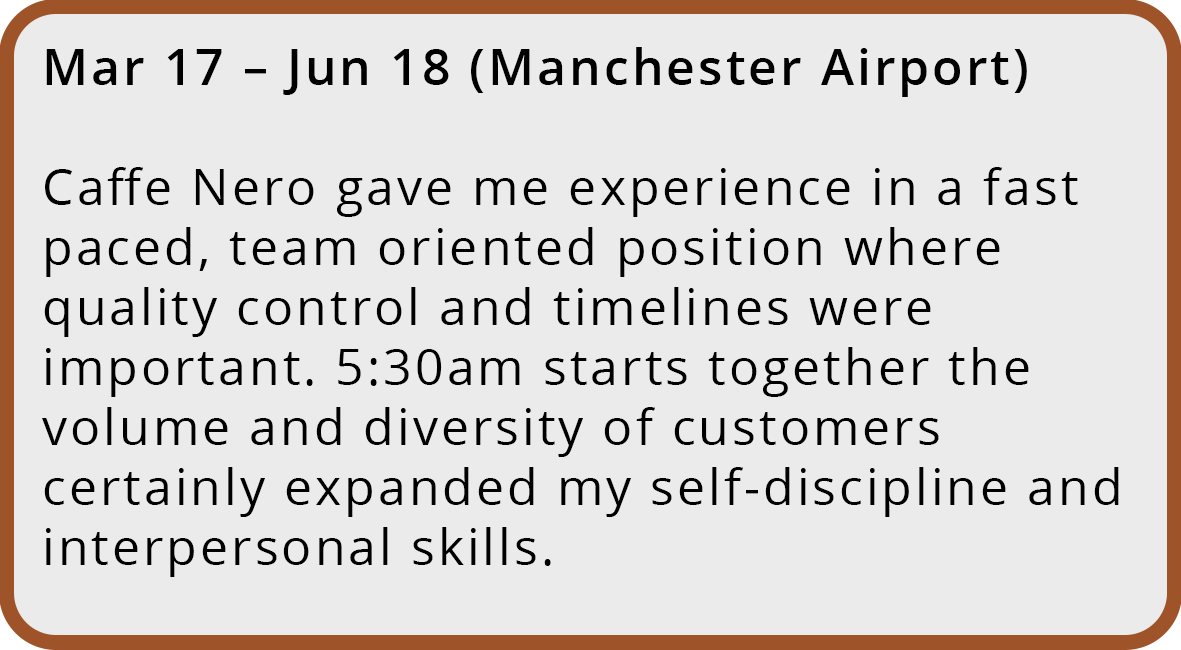
<style>
.page{position:relative;width:1181px;height:650px;background:#ebebeb}
.page>*{position:absolute;margin:0}
.t1{font:50px "OpenSans-Regular";letter-spacing:0.06em;color:#000000}
.t2{font:50px "OpenSans-SemiBold";letter-spacing:0.06em;color:#000000}
</style>
<div class="page">
<p class="t1" style="left:42px;top:47px;width:1077px;height:530px"><span class="t2">Mar 17 – Jun 18 (Manchester Airport)<br></span><br>Caffe Nero gave me experience in a fast paced, team oriented position where quality control and timelines were important. 5:30am starts together the volume and diversity of customers certainly expanded my self-discipline and interpersonal skills.</p>
</div>
